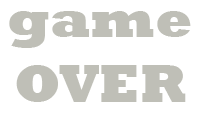
<style>
.page{position:relative;width:200px;height:125px;background:#ffffff}
.page>*{position:absolute;margin:0}
.t1{font:54.2px "Rockwell-ExtraBold";color:#c0c0b8}
</style>
<div class="page">
<p class="t1" style="left:9px;top:11px;width:182px;height:91px">game OVER</p>
</div>
